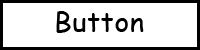
<style>
.page{position:relative;width:200px;height:50px;background:#ffffff}
.page>*{position:absolute;margin:0}
.t1{font:27.8px "ComicSansMS";letter-spacing:0.02em;color:#000000}
</style>
<div class="page">
<p class="t1" style="left:56px;top:11px;width:88px;height:22px">Button</p>
</div>
